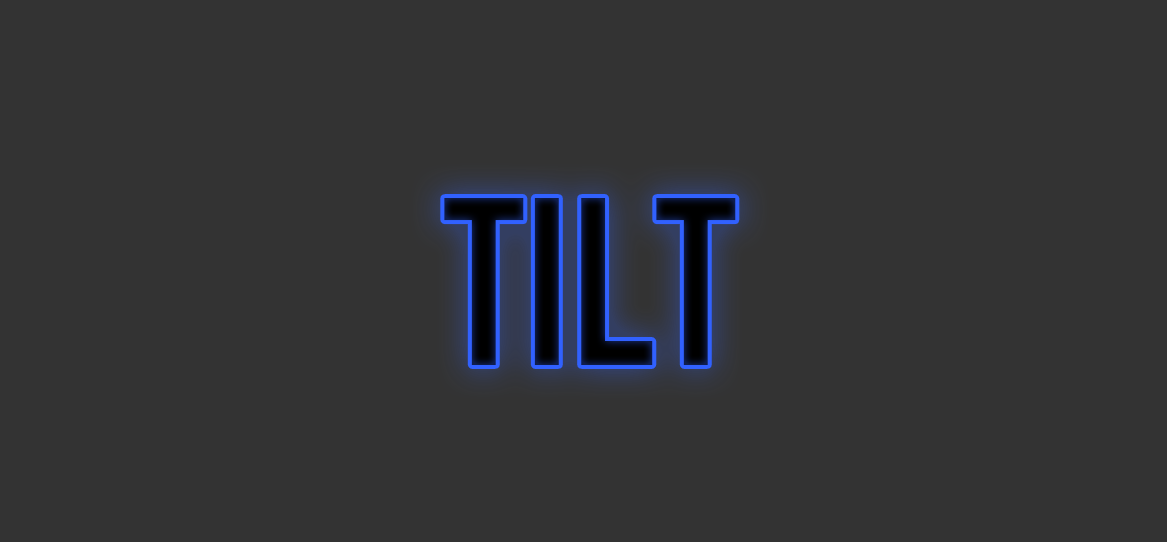
<style>
.page{position:relative;width:1167px;height:542px;background:#333333}
.page>*{position:absolute;margin:0}
.t1{font:233.7px "DINEngschrift";color:#03050e}
</style>
<div class="page">
<p class="t1" style="left:444px;top:198px;width:292px;height:167px">TILT</p>
</div>
